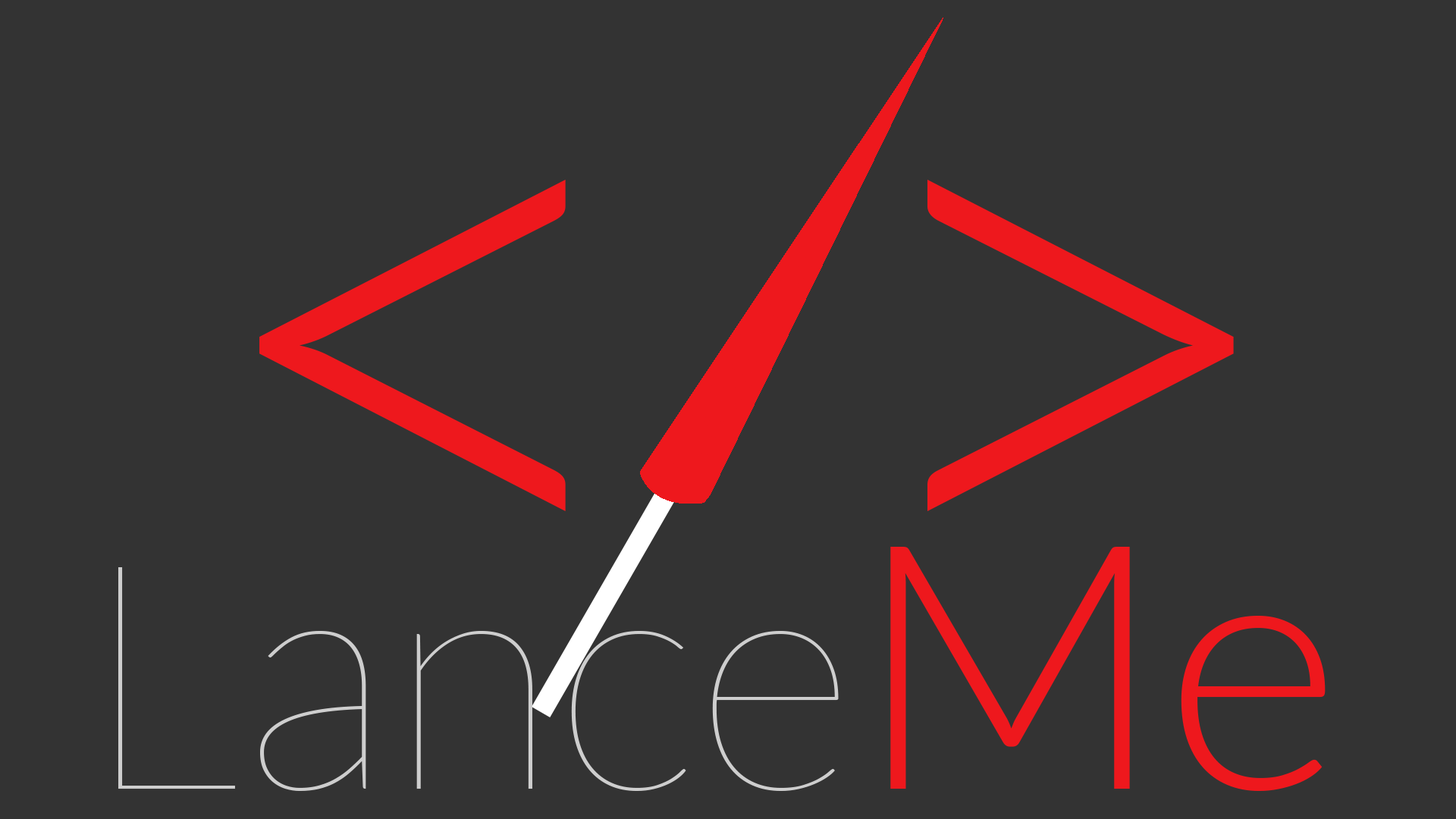
<style>
.page{position:relative;width:1456px;height:819px;background:#333333}
.page>*{position:absolute;margin:0}
.t1{font:816.3px "Lato-Light";color:#ee181d}
.t2{font:316px "Lato-Hairline";color:#cecece}
.t3{font:342.3px "Lato-Light";color:#ee181d}
</style>
<div class="page">
<p class="t1" style="left:259px;top:180px;width:975px;height:331px">&lt; &gt;</p>
<p class="t2" style="left:118px;top:547px;width:1208px;height:244px">Lance<span class="t3">Me</span></p>
</div>
